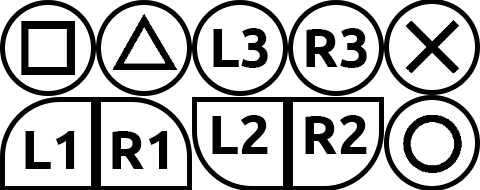
<style>
.page{position:relative;width:480px;height:190px;background:#ffffff}
.page>*{position:absolute;margin:0}
.t1{font:55.3px "Ubuntu-Bold";color:#000000}
</style>
<div class="page">
<p class="t1" style="left:213px;top:28px;width:55px;height:40px">L3</p>
<p class="t1" style="left:306px;top:28px;width:61px;height:40px">R3</p>
<p class="t1" style="left:212px;top:115px;width:56px;height:39px">L2</p>
<p class="t1" style="left:305px;top:115px;width:62px;height:39px">R2</p>
<p class="t1" style="left:25px;top:131px;width:50px;height:38px">L1</p>
<p class="t1" style="left:112px;top:131px;width:56px;height:38px">R1</p>
</div>
